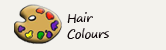
<style>
.page{position:relative;width:166px;height:50px;background:#f3f2ed}
.page>*{position:absolute;margin:0}
.t1{font:12px/6px "SegoePrint";letter-spacing:-0.025em;color:#0e0507}
</style>
<div class="page">
<p class="t1" style="left:67px;top:12px;width:42px;height:27px">Hair<br><br>Colours</p>
</div>
